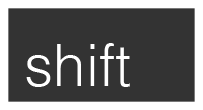
<style>
.page{position:relative;width:203px;height:110px;background:#333333}
.page>*{position:absolute;margin:0}
.t1{font:58.3px "Helvetica-Light";color:#ffffff}
</style>
<div class="page">
<p class="t1" style="left:26px;top:43px;width:104px;height:44px">shift</p>
</div>
